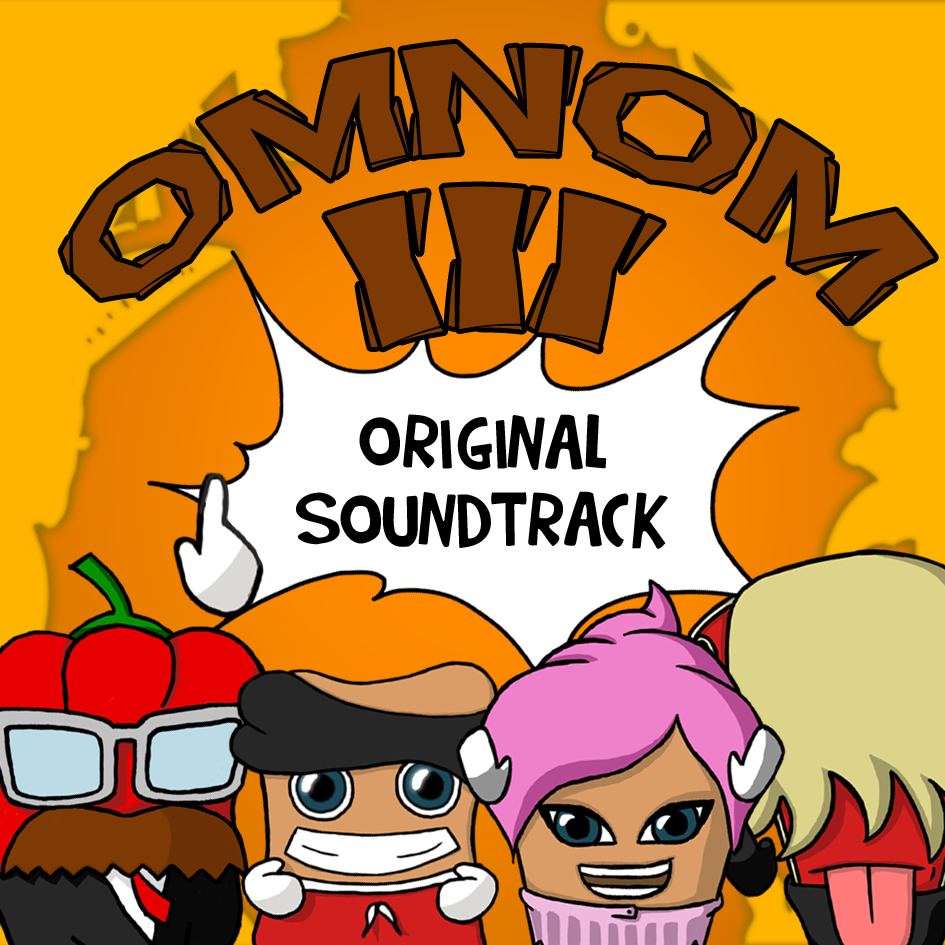
<style>
.page{position:relative;width:945px;height:945px}
.page>*{position:absolute;margin:0}
.t1{font:183.3px/96px "BlueHighwayLinocut";letter-spacing:-0.03em;color:#7d3a04;scale:0.61 1}
.t2{font:252.1px/178.8px "BlueHighwayLinocut";letter-spacing:-0.02em;color:#7d3a04}
.t3{font:84.3px/77.5px "Rumpelstiltskin";letter-spacing:-0.02em;color:#000000}
</style>
<div class="page">
<p class="t1" style="left:62px;top:43px;width:872px;height:307px;text-align:center">OMNOM<br><span class="t2">III</span></p>
<p class="t3" style="left:296px;top:414px;width:372px;height:135px;text-align:center">ORIGINAL<br>SOUNDTRACK</p>
</div>
